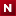
<style>
.page{position:relative;width:16px;height:16px}
.page>*{position:absolute;margin:0}
.t1{font:11.5px "Ubuntu-Bold";color:#ffffff}
</style>
<div class="page">
<p class="t1" style="left:4px;top:4px;width:8px;height:8px">N</p>
</div>
